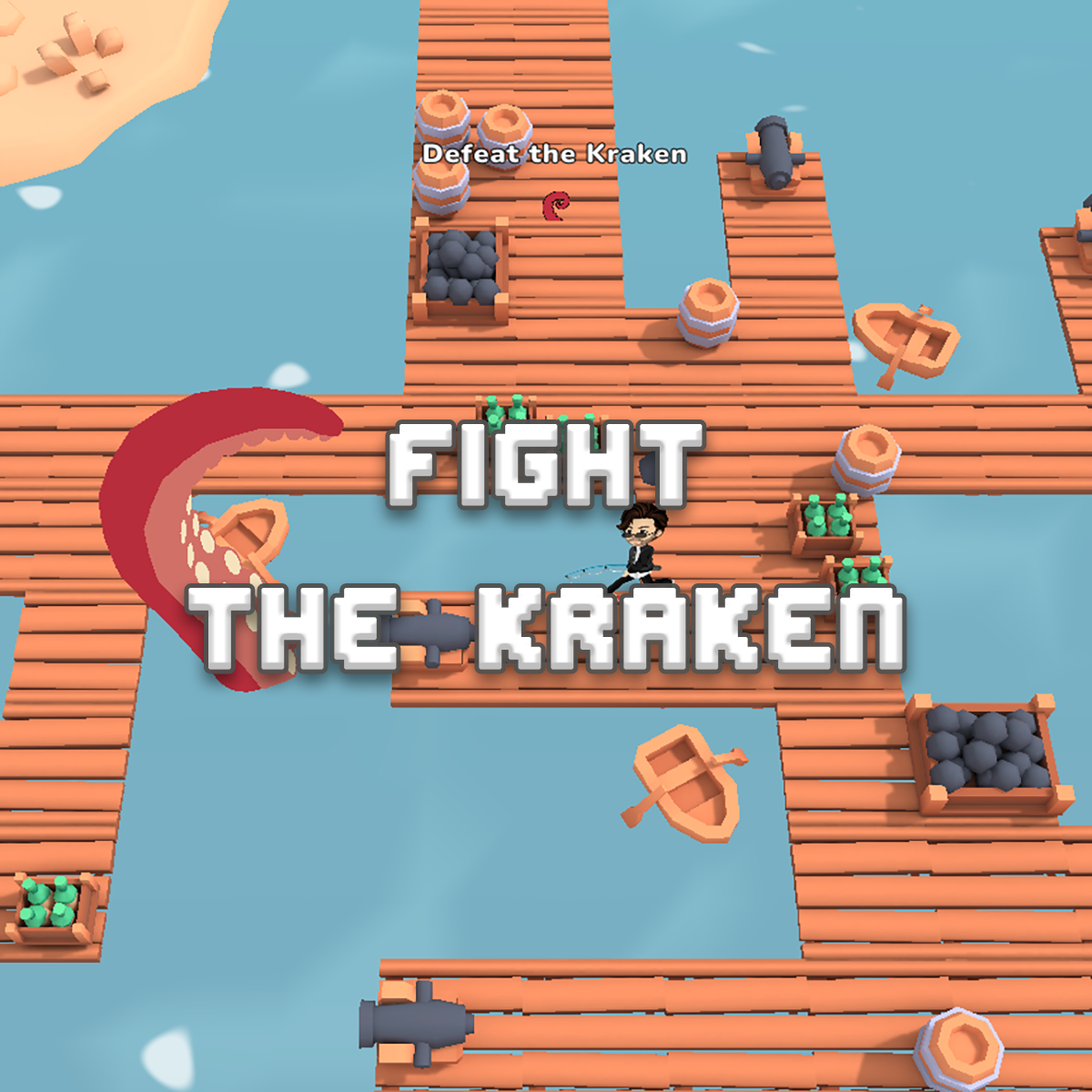
<style>
.page{position:relative;width:1092px;height:1092px}
.page>*{position:absolute;margin:0}
.t1{font:136.5px "EditUndoBRK";color:#ffffff;font-weight:bold}
</style>
<div class="page">
<p class="t1" style="left:188px;top:424px;width:715px;height:246px;text-align:center">Fight<br>the kraken</p>
</div>
